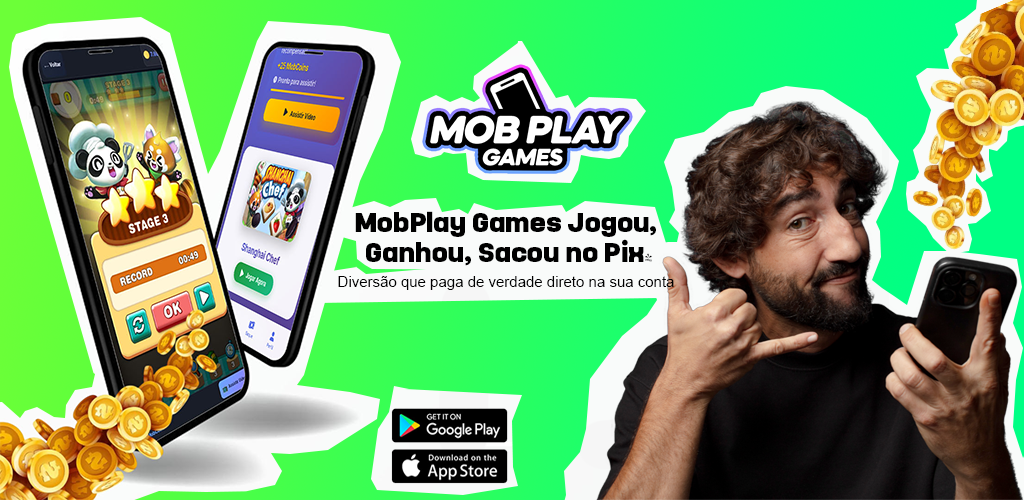
<style>
.page{position:relative;width:1024px;height:500px}
.page>*{position:absolute;margin:0}
.t1{font:27px/30px "FONTSPRINGDEMO-YoshidaSansBlackRegular";color:#000000}
.t2{font:15px "ArialMT";color:#000000}
</style>
<div class="page">
<p class="t1" style="left:355px;top:211px;width:301px;height:55px;text-align:center">MobPlay Games Jogou, <br>Ganhou, Sacou no Pix!</p>
<p class="t2" style="left:338px;top:276px;width:336px;height:14px">Diversão que paga de verdade direto na sua conta</p>
</div>
